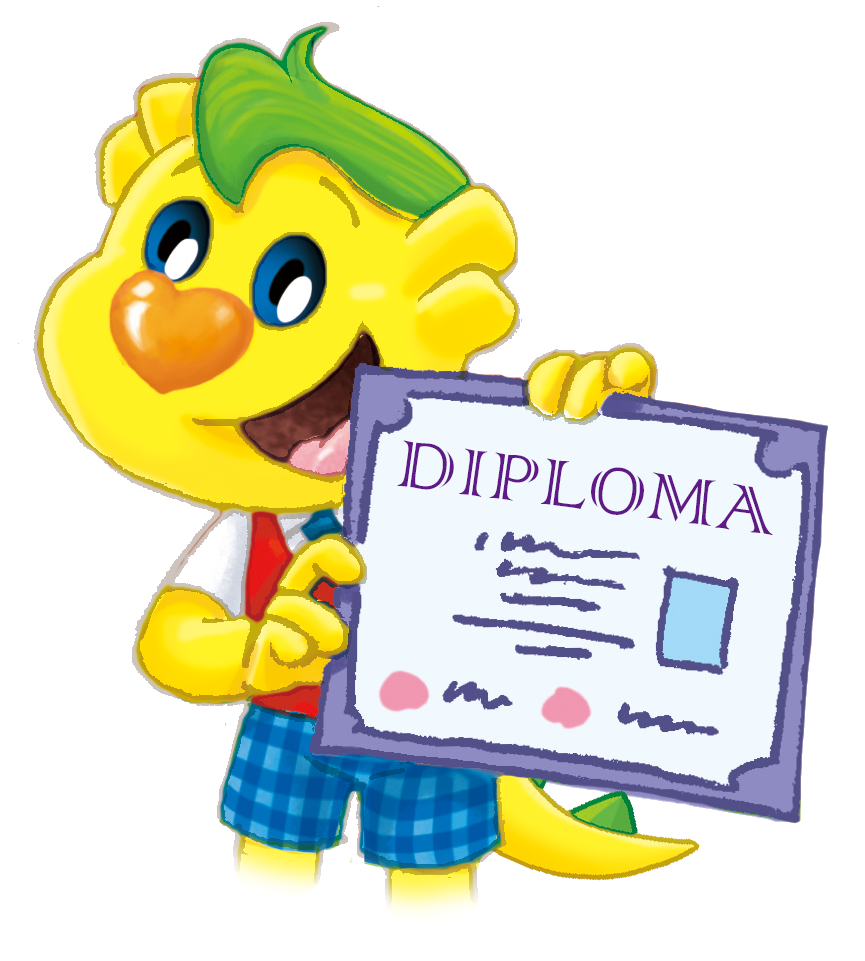
<style>
.page{position:relative;width:865px;height:961px;background:#ffffff}
.page>*{position:absolute;margin:0}
.t1{font:87px "ColonnaMT";letter-spacing:0.02em;color:#601986}
</style>
<div class="page">
<p class="t1" style="left:397px;top:440px;width:376px;height:96px;rotate:7deg">DIPLOMA</p>
</div>
